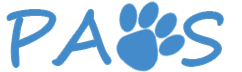
<style>
.page{position:relative;width:242px;height:72px;background:#ffffff}
.page>*{position:absolute;margin:0}
.t1{font:72px "SegoeScript";letter-spacing:0.05em;color:#428bca;text-transform:uppercase}
</style>
<div class="page">
<p class="t1" style="left:7px;top:10px;width:216px;height:57px">Pa  s</p>
</div>
